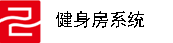
<style>
.page{position:relative;width:173px;height:43px;background:#ffffff}
.page>*{position:absolute;margin:0}
.t1{font:18px "SimHei";color:#000000}
</style>
<div class="page">
<p class="t1" style="left:56px;top:11px;width:88px;height:17px">健身房系统</p>
</div>
